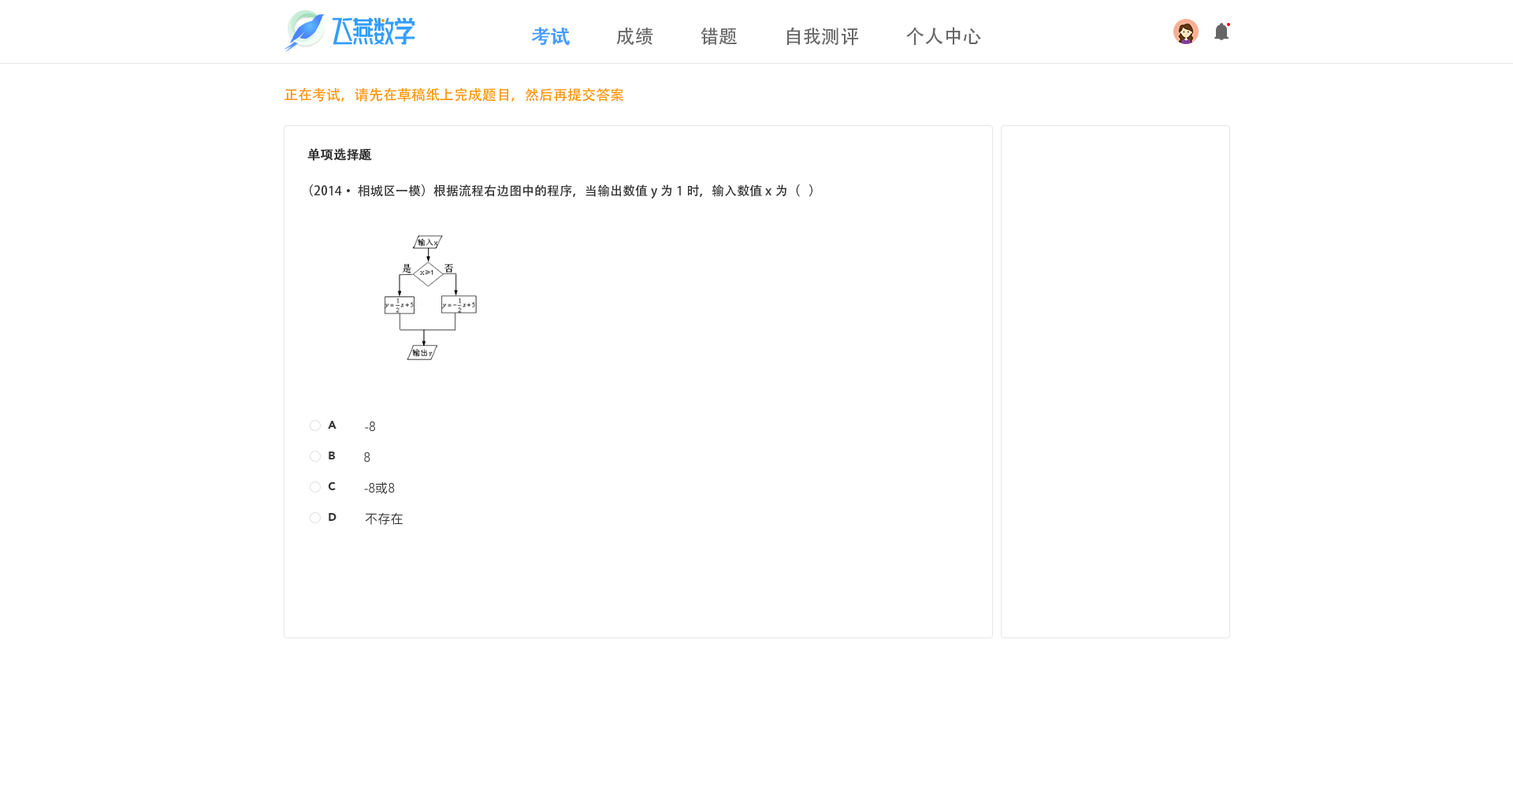
<style>
.page{position:relative;width:1513px;height:788px;background:#ffffff}
.page>*{position:absolute;margin:0}
.t1{font:18.9px "AdobeHeitiStd-Regular";color:#459dfd;font-weight:bold}
.t2{font:18.9px "AdobeHeitiStd-Regular";color:#666666}
.t3{font:14.2px "AdobeHeitiStd-Regular";color:#ff9902}
.t4{font:12.6px "AdobeHeitiStd-Regular";color:#333333;font-weight:bold}
.t5{font:12.6px "AdobeHeitiStd-Regular";color:#333333}
</style>
<div class="page">
<p class="t1" style="left:531px;top:27px;width:39px;height:19px">考试</p>
<p class="t2" style="left:616px;top:27px;width:37px;height:18px">成绩</p>
<p class="t2" style="left:701px;top:28px;width:36px;height:17px">错题</p>
<p class="t2" style="left:786px;top:27px;width:72px;height:19px">自我测评</p>
<p class="t2" style="left:906px;top:27px;width:75px;height:18px">个人中心</p>
<p class="t3" style="left:284px;top:87px;width:339px;height:15px">正在考试，请先在草稿纸上完成题目，然后再提交答案</p>
<p class="t4" style="left:307px;top:148px;width:65px;height:13px">单项选择题</p>
<p class="t5" style="left:310px;top:184px;width:503px;height:15px">（2014·相城区一模）根据流程右边图中的程序，当输出数值y为1时，输入数值x为（   ）</p>
</div>
